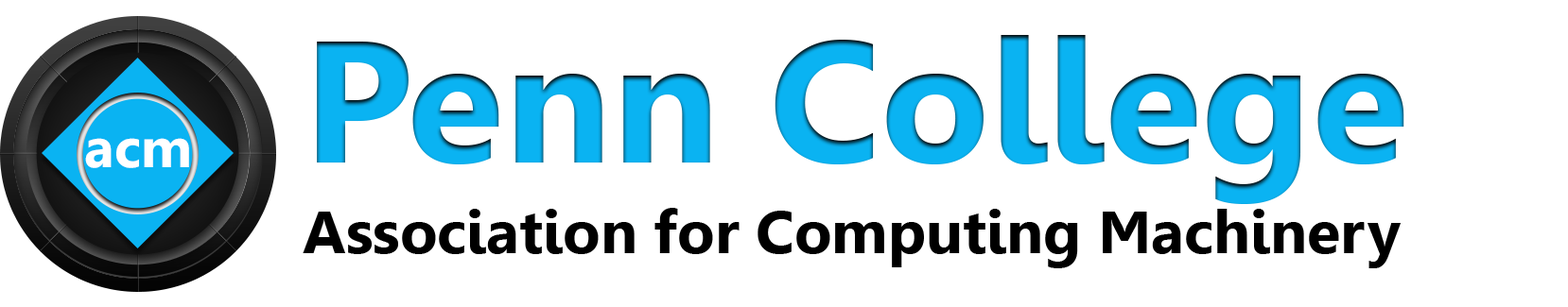
<style>
.page{position:relative;width:1568px;height:307px;background:#ffffff}
.page>*{position:absolute;margin:0}
.t1{font:173.5px "Leelawadee-Bold";color:#0ab3f2;scale:1.03 1}
.t2{font:55.6px "Leelawadee-Bold";color:#ffffff}
.t3{font:59.4px "Leelawadee-Bold";color:#000000;scale:1.03 1}
</style>
<div class="page">
<p class="t1" style="left:317px;top:35px;width:1087px;height:169px">Penn College</p>
<p class="t2" style="left:85px;top:138px;width:104px;height:30px">acm</p>
<p class="t3" style="left:303px;top:208px;width:1098px;height:61px">Association for Computing Machinery</p>
</div>
